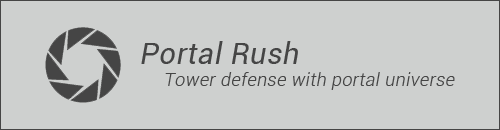
<style>
.page{position:relative;width:500px;height:130px;background:#ced0cf}
.page>*{position:absolute;margin:0}
.t1{font:18px "Roboto-Light";letter-spacing:0.025em;color:#454545;font-style:italic}
.t2{font:29px "Roboto-Regular";letter-spacing:0.025em;color:#454545;font-style:italic}
</style>
<div class="page">
<p class="t1" style="left:141px;top:41px;width:314px;height:49px"><span class="t2">Portal Rush<br></span>     Tower defense with portal universe</p>
</div>
